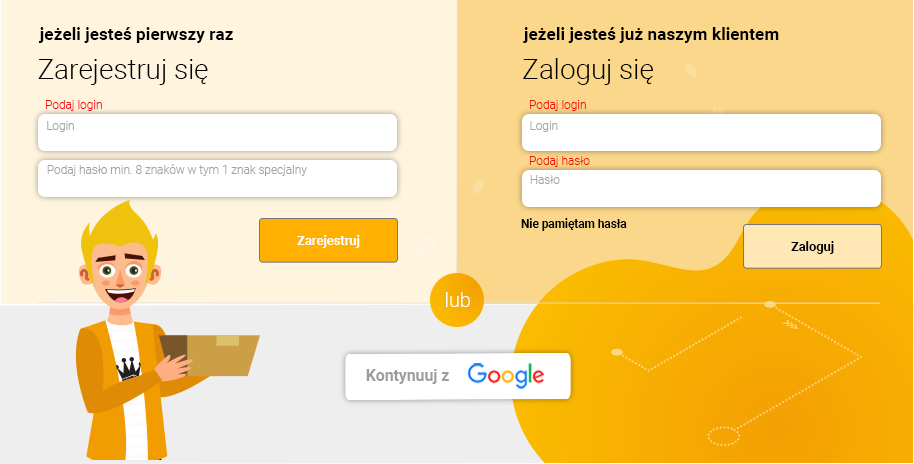
<style>
.page{position:relative;width:914px;height:464px;background:#fff4de}
.page>*{position:absolute;margin:0}
.t1{font:17.3px "Roboto-Bold";color:#000000}
.t2{font:27.8px "Roboto-Light";color:#000000}
.t3{font:11.9px "Roboto-Light";color:#f20c0c}
.t4{font:11.8px "Roboto-Light";color:#a3a3a3}
.t5{font:11.8px "Roboto-Bold";color:#000000}
.t6{font:12.8px "Roboto-Bold";color:#ffffff}
.t7{font:12.8px "Roboto-Bold";color:#000000}
.t8{font:19.7px "Roboto-Light";color:#ffffff}
.t9{font:15.7px "Roboto-Bold";color:#9d9d9f}
</style>
<div class="page">
<p class="t1" style="left:39px;top:27px;width:194px;height:16px">jeżeli jesteś pierwszy raz</p>
<p class="t1" style="left:523px;top:27px;width:256px;height:16px">jeżeli jesteś już naszym klientem</p>
<p class="t2" style="left:38px;top:59px;width:170px;height:26px">Zarejestruj się</p>
<p class="t2" style="left:523px;top:58px;width:130px;height:27px">Zaloguj się</p>
<p class="t3" style="left:46px;top:100px;width:56px;height:11px">Podaj login</p>
<p class="t3" style="left:530px;top:100px;width:56px;height:11px">Podaj login</p>
<p class="t4" style="left:47px;top:121px;width:27px;height:11px">Login</p>
<p class="t4" style="left:530px;top:121px;width:28px;height:11px">Login</p>
<p class="t3" style="left:530px;top:156px;width:60px;height:11px">Podaj hasło</p>
<p class="t4" style="left:47px;top:164px;width:260px;height:12px">Podaj hasło min. 8 znaków w tym 1 znak specjalny</p>
<p class="t4" style="left:530px;top:175px;width:30px;height:9px">Hasło</p>
<p class="t5" style="left:521px;top:218px;width:106px;height:13px">Nie pamiętam hasła</p>
<p class="t6" style="left:297px;top:235px;width:63px;height:13px">Zarejestruj</p>
<p class="t7" style="left:791px;top:241px;width:43px;height:13px">Zaloguj</p>
<p class="t8" style="left:446px;top:292px;width:24px;height:15px">lub</p>
<p class="t9" style="left:366px;top:369px;width:83px;height:15px">Kontynuuj z</p>
</div>
